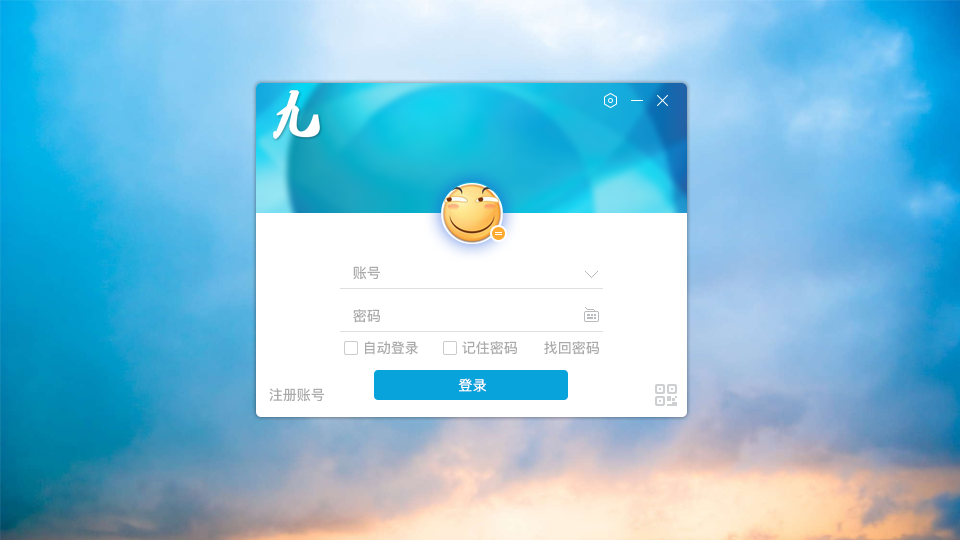
<style>
.page{position:relative;width:960px;height:540px}
.page>*{position:absolute;margin:0}
.t1{font:14px "PingFang-SC-Bold";color:#aaaaaa}
.t2{font:14px "PingFang-SC-Regular";color:#ffffff;font-weight:bold}
</style>
<div class="page">
<p class="t1" style="left:353px;top:266px;width:27px;height:14px">账号</p>
<p class="t1" style="left:353px;top:309px;width:27px;height:14px">密码</p>
<p class="t1" style="left:365px;top:341px;width:53px;height:14px">自动登录</p>
<p class="t1" style="left:462px;top:341px;width:55px;height:14px">记住密码</p>
<p class="t1" style="left:544px;top:341px;width:55px;height:14px">找回密码</p>
<p class="t1" style="left:269px;top:388px;width:55px;height:14px">注册账号</p>
<p class="t2" style="left:458px;top:378px;width:28px;height:14px">登录</p>
</div>
